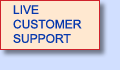
<style>
.page{position:relative;width:120px;height:70px;background:#ffe8d0}
.page>*{position:absolute;margin:0}
.t1{font:12px "ArialMT";color:#0638ad}
</style>
<div class="page">
<p class="t1" style="left:13px;top:5px;width:69px;height:38px">LIVE <br>CUSTOMER <br>SUPPORT</p>
</div>
